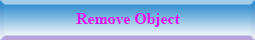
<style>
.page{position:relative;width:255px;height:40px}
.page>*{position:absolute;margin:0}
.t1{font:15.8px "TimesNewRomanPS-BoldMT";color:#d815ed}
</style>
<div class="page">
<p class="t1" style="left:76px;top:13px;width:104px;height:14px">Remove Object</p>
</div>
